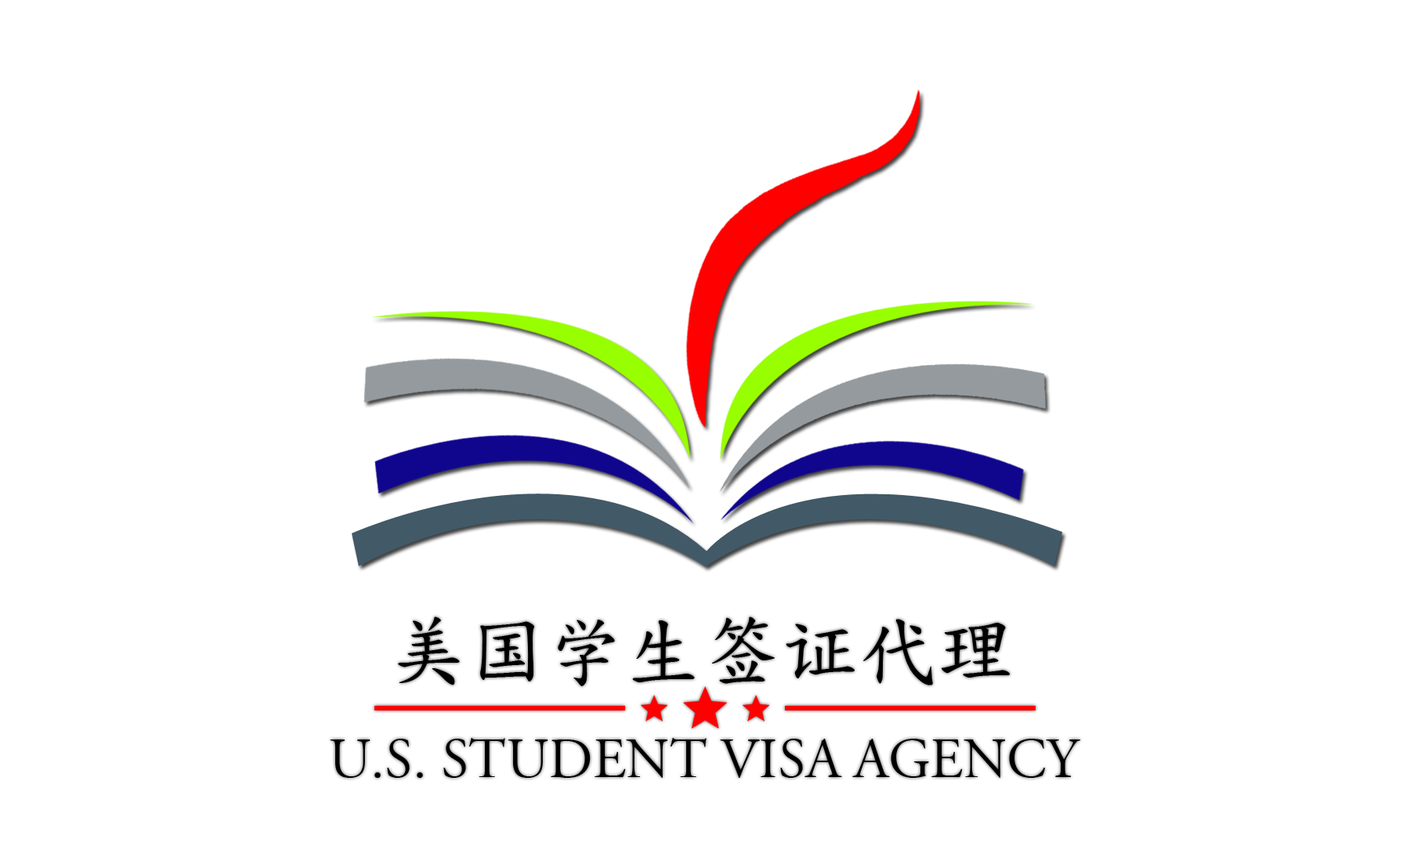
<style>
.page{position:relative;width:1410px;height:846px;background:#ffffff}
.page>*{position:absolute;margin:0}
.t1{font:78.3px "DFKaiShu-SB-Estd-BF";color:#000000}
.t2{font:56.4px "AGaramondLT-Titling";color:#000000}
</style>
<div class="page">
<p class="t1" style="left:398px;top:616px;width:612px;height:70px">美国学生签证代理</p>
<p class="t2" style="left:330px;top:738px;width:751px;height:40px">u.s. Student Visa agency</p>
</div>
